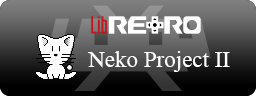
<style>
.page{position:relative;width:256px;height:96px}
.page>*{position:absolute;margin:0}
.t1{font:23px "TimesNewRomanPSMT";color:#ffffff}
</style>
<div class="page">
<p class="t1" style="left:87px;top:51px;width:143px;height:21px">Neko Project II</p>
</div>
